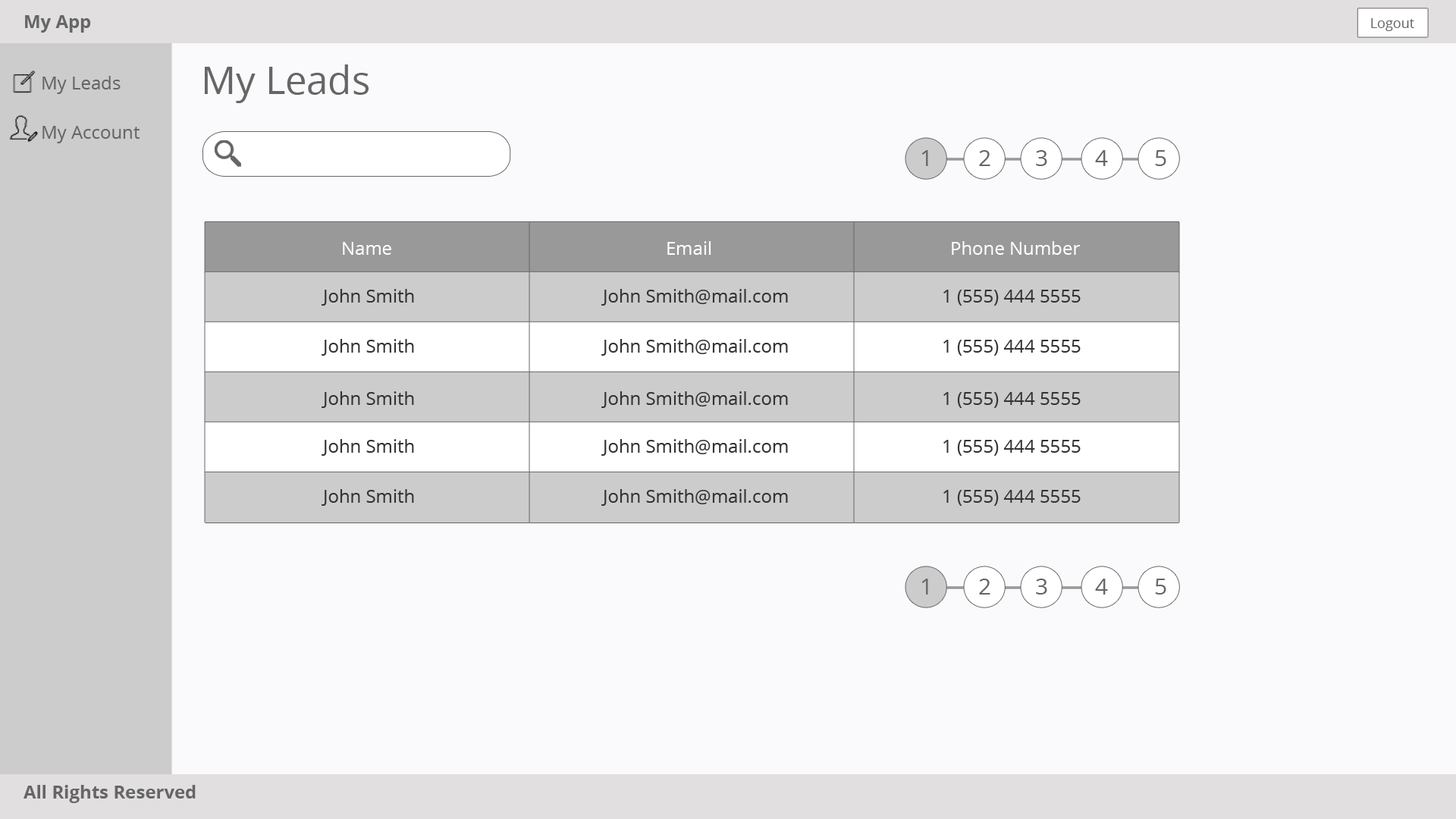
<style>
.page{position:relative;width:1456px;height:819px;background:#faf9fb}
.page>*{position:absolute;margin:0}
.t1{font:18.2px "OpenSans-Bold";color:#666666}
.t2{font:13.6px "OpenSans";color:#666666}
.t3{font:38.4px "OpenSans";color:#666666}
.t4{font:18.2px "OpenSans";color:#666666}
.t5{font:22.7px "OpenSans";color:#666666}
.t6{font:18.2px "OpenSans";color:#ffffff}
.t7{font:18.2px "OpenSans";color:#333333}
</style>
<div class="page">
<p class="t1" style="left:25px;top:15px;width:66px;height:18px">My App</p>
<p class="t2" style="left:1371px;top:18px;width:43px;height:13px">Logout</p>
<p class="t3" style="left:205px;top:64px;width:164px;height:39px">My Leads</p>
<p class="t4" style="left:42px;top:76px;width:79px;height:18px">My Leads</p>
<p class="t4" style="left:42px;top:126px;width:98px;height:17px">My Account</p>
<p class="t5" style="left:921px;top:150px;width:7px;height:16px">1</p>
<p class="t5" style="left:979px;top:150px;width:11px;height:16px">2</p>
<p class="t5" style="left:1036px;top:150px;width:11px;height:16px">3</p>
<p class="t5" style="left:1095px;top:150px;width:13px;height:16px">4</p>
<p class="t5" style="left:1155px;top:150px;width:11px;height:16px">5</p>
<p class="t6" style="left:343px;top:242px;width:48px;height:13px">Name</p>
<p class="t6" style="left:667px;top:241px;width:44px;height:14px">Email</p>
<p class="t6" style="left:952px;top:241px;width:128px;height:14px">Phone Number</p>
<p class="t7" style="left:322px;top:289px;width:92px;height:17px">John Smith</p>
<p class="t7" style="left:601px;top:289px;width:187px;height:17px">John Smith@mail.com</p>
<p class="t7" style="left:943px;top:290px;width:138px;height:16px">1 (555) 444 5555</p>
<p class="t7" style="left:322px;top:339px;width:92px;height:17px">John Smith</p>
<p class="t7" style="left:601px;top:339px;width:187px;height:17px">John Smith@mail.com</p>
<p class="t7" style="left:943px;top:340px;width:138px;height:16px">1 (555) 444 5555</p>
<p class="t7" style="left:322px;top:391px;width:92px;height:17px">John Smith</p>
<p class="t7" style="left:601px;top:391px;width:187px;height:17px">John Smith@mail.com</p>
<p class="t7" style="left:943px;top:392px;width:138px;height:16px">1 (555) 444 5555</p>
<p class="t7" style="left:322px;top:439px;width:92px;height:17px">John Smith</p>
<p class="t7" style="left:601px;top:439px;width:187px;height:17px">John Smith@mail.com</p>
<p class="t7" style="left:943px;top:440px;width:138px;height:16px">1 (555) 444 5555</p>
<p class="t7" style="left:322px;top:489px;width:92px;height:17px">John Smith</p>
<p class="t7" style="left:601px;top:489px;width:187px;height:17px">John Smith@mail.com</p>
<p class="t7" style="left:943px;top:490px;width:138px;height:16px">1 (555) 444 5555</p>
<p class="t5" style="left:921px;top:579px;width:7px;height:16px">1</p>
<p class="t5" style="left:979px;top:579px;width:11px;height:16px">2</p>
<p class="t5" style="left:1036px;top:579px;width:11px;height:16px">3</p>
<p class="t5" style="left:1095px;top:579px;width:13px;height:16px">4</p>
<p class="t5" style="left:1155px;top:579px;width:11px;height:16px">5</p>
<p class="t1" style="left:24px;top:785px;width:172px;height:18px">All Rights Reserved</p>
</div>
